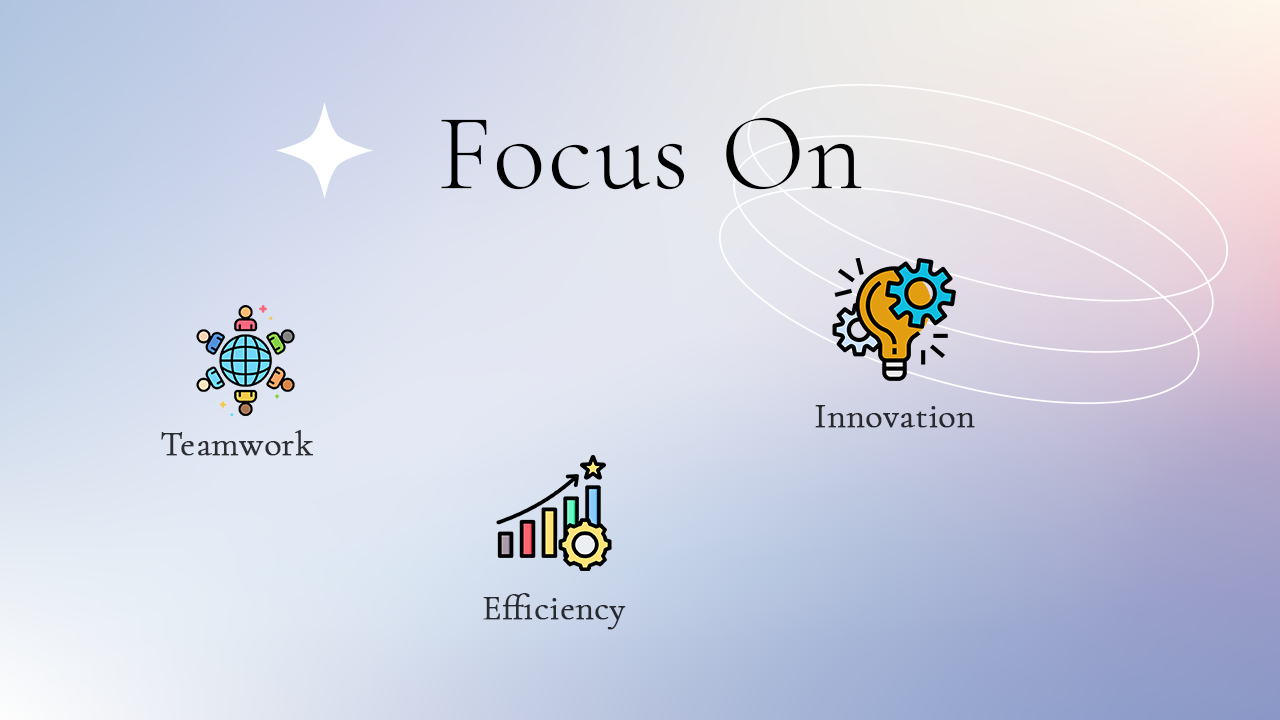
<style>
.page{position:relative;width:1280px;height:720px}
.page>*{position:absolute;margin:0}
.t1{font:109.4px "CormorantGaramond-Light";color:#000000;font-weight:bold}
.t2{font:35.3px "CormorantGaramond-Light";color:#28282d;font-weight:bold}
.t3{font:35.3px "CormorantGaramond-Light";color:#2d2e31;font-weight:bold}
.t4{font:35.3px "CormorantGaramond-Light";color:#282b2f;font-weight:bold}
</style>
<div class="page">
<p class="t1" style="left:441px;top:117px;width:421px;height:73px">Focus On</p>
<p class="t2" style="left:815px;top:405px;width:160px;height:23px">Innovation</p>
<p class="t3" style="left:161px;top:430px;width:152px;height:26px">Teamwork</p>
<p class="t4" style="left:483px;top:593px;width:143px;height:37px">Efficiency</p>
</div>
